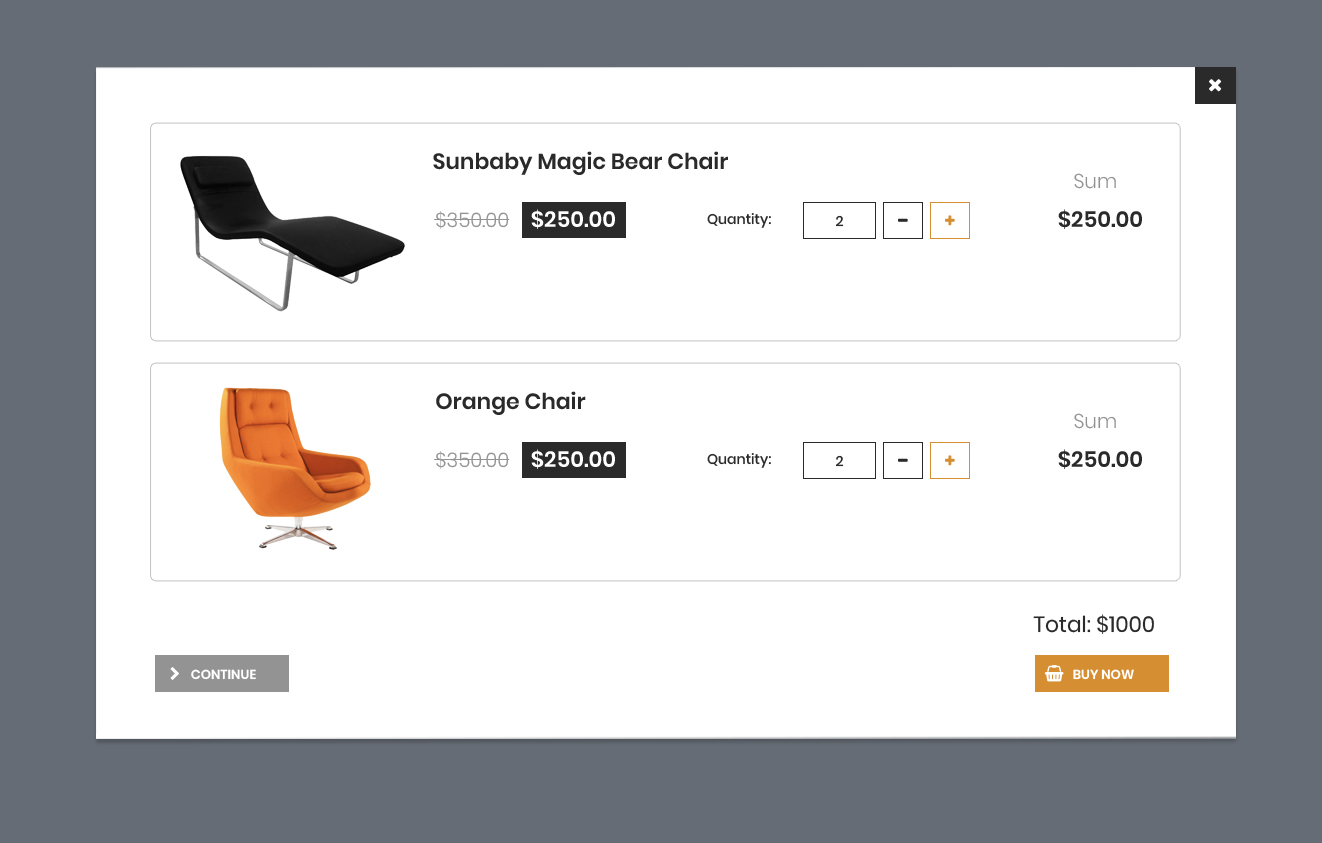
<style>
.page{position:relative;width:1322px;height:843px;background:#ffffff}
.page>*{position:absolute;margin:0}
.t1{font:22px "Poppins-SemiBold";color:#2a2a2a}
.t2{font:20px "Poppins-Light";color:#939393}
.t3{font:22px "Poppins-SemiBold";color:#ffffff}
.t4{font:14px "Poppins-Medium";color:#2a2a2a}
.t5{font:22px "Poppins-Regular";color:#2a2a2a}
.t6{font:13px "Poppins-SemiBold";color:#ffffff;text-transform:uppercase}
</style>
<div class="page">
<p class="t1" style="left:433px;top:151px;width:295px;height:24px">Sunbaby Magic Bear Chair</p>
<p class="t2" style="left:1074px;top:173px;width:42px;height:16px">Sum</p>
<p class="t3" style="left:531px;top:209px;width:84px;height:20px">$250.00</p>
<p class="t1" style="left:1058px;top:209px;width:84px;height:20px">$250.00</p>
<p class="t2" style="left:436px;top:211px;width:73px;height:18px">$350.00</p>
<p class="t4" style="left:707px;top:213px;width:64px;height:15px">Quantity:</p>
<p class="t4" style="left:835px;top:215px;width:9px;height:12px">2</p>
<p class="t1" style="left:436px;top:391px;width:150px;height:24px">Orange Chair</p>
<p class="t2" style="left:1074px;top:413px;width:42px;height:16px">Sum</p>
<p class="t3" style="left:531px;top:449px;width:84px;height:20px">$250.00</p>
<p class="t1" style="left:1058px;top:449px;width:84px;height:20px">$250.00</p>
<p class="t2" style="left:436px;top:451px;width:73px;height:18px">$350.00</p>
<p class="t4" style="left:707px;top:453px;width:64px;height:15px">Quantity:</p>
<p class="t4" style="left:835px;top:455px;width:9px;height:12px">2</p>
<p class="t5" style="left:1033px;top:614px;width:121px;height:20px">Total: $1000</p>
<p class="t6" style="left:191px;top:669px;width:65px;height:11px">continue</p>
<p class="t6" style="left:1073px;top:669px;width:61px;height:11px">buy now</p>
</div>
